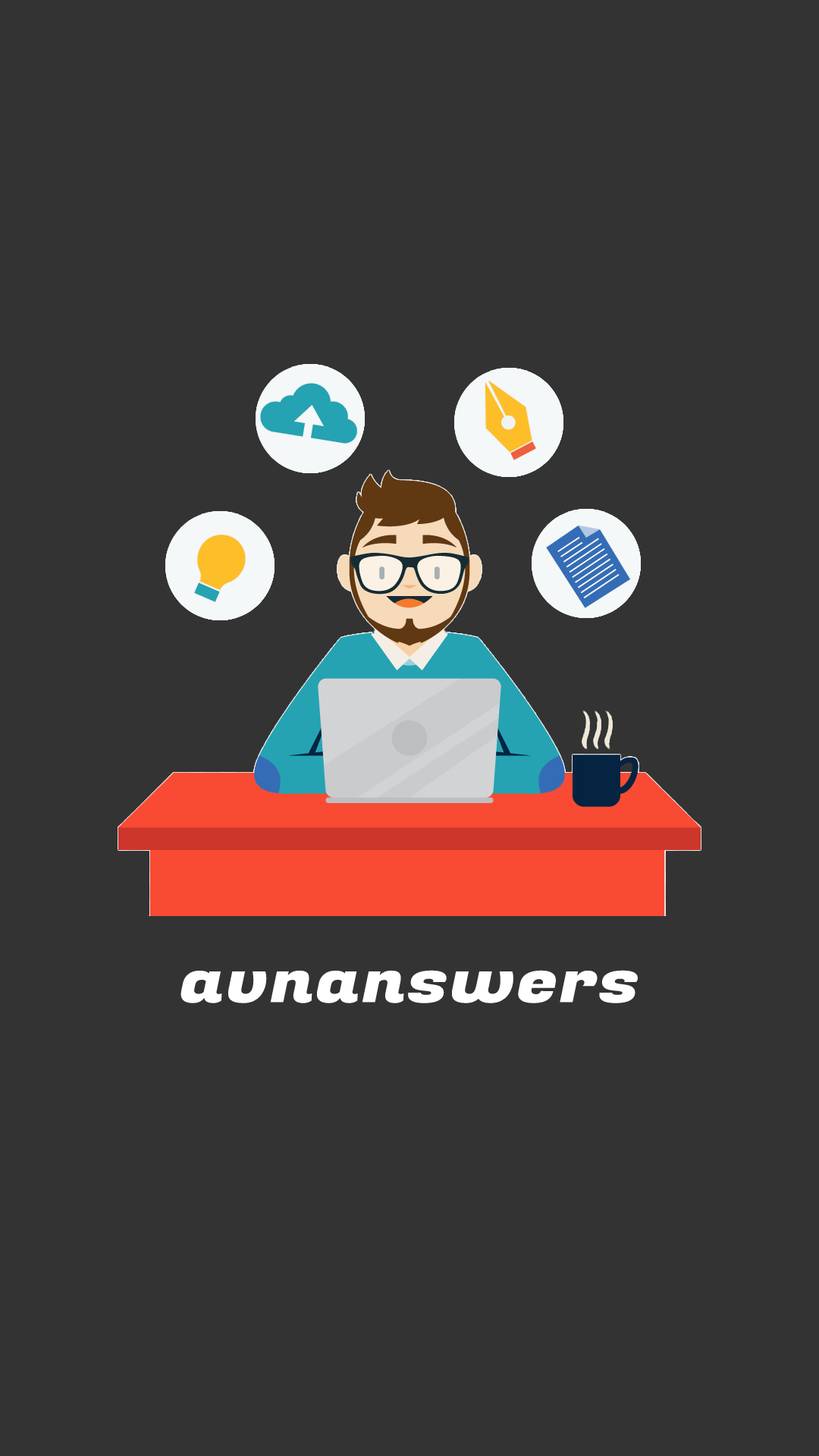
<style>
.page{position:relative;width:819px;height:1456px;background:#333333}
.page>*{position:absolute;margin:0}
.t1{font:63.9px "FugazOne-Regular";letter-spacing:0.02em;color:#ffffff;scale:1.17 1}
</style>
<div class="page">
<p class="t1" style="left:180px;top:970px;width:459px;height:33px">avnanswers</p>
</div>
